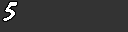
<style>
.page{position:relative;width:128px;height:32px;background:#333333}
.page>*{position:absolute;margin:0}
.t1{font:30px "DomDiagonalBT-Regular";color:#ffffff}
</style>
<div class="page">
<p class="t1" style="left:3px;top:2px;width:14px;height:19px">5</p>
</div>
